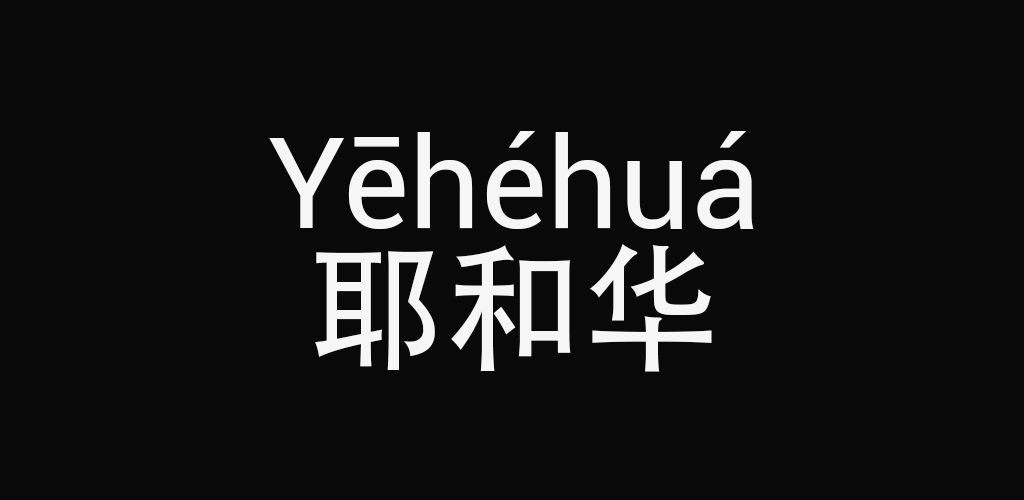
<style>
.page{position:relative;width:1024px;height:500px;background:#090909}
.page>*{position:absolute;margin:0}
.t1{font:125.7px "Roboto-Regular";color:#f6f6f6}
.t2{font:137.2px "AdobeHeitiStd-Regular";color:#f6f6f6}
</style>
<div class="page">
<p class="t1" style="left:269px;top:131px;width:485px;height:98px">Yēhéhuá</p>
<p class="t2" style="left:315px;top:244px;width:397px;height:128px">耶和华</p>
</div>
